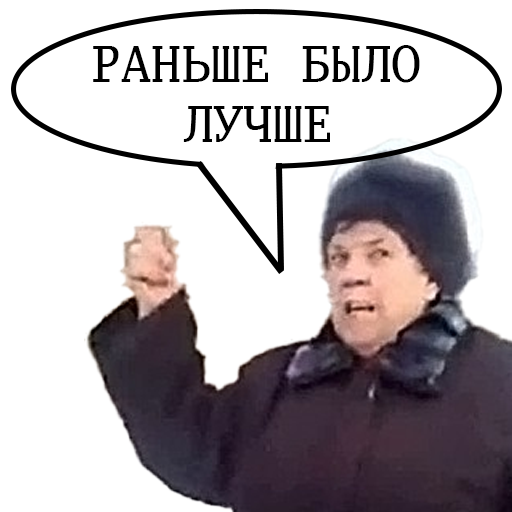
<style>
.page{position:relative;width:512px;height:512px;background:#ffffff}
.page>*{position:absolute;margin:0}
.t1{font:50px "GoMonoForPowerline";color:#000000}
</style>
<div class="page">
<p class="t1" style="left:93px;top:45px;width:327px;height:38px">РАНЬШЕ БЫЛО</p>
<p class="t1" style="left:183px;top:106px;width:147px;height:36px">ЛУЧШЕ</p>
</div>
